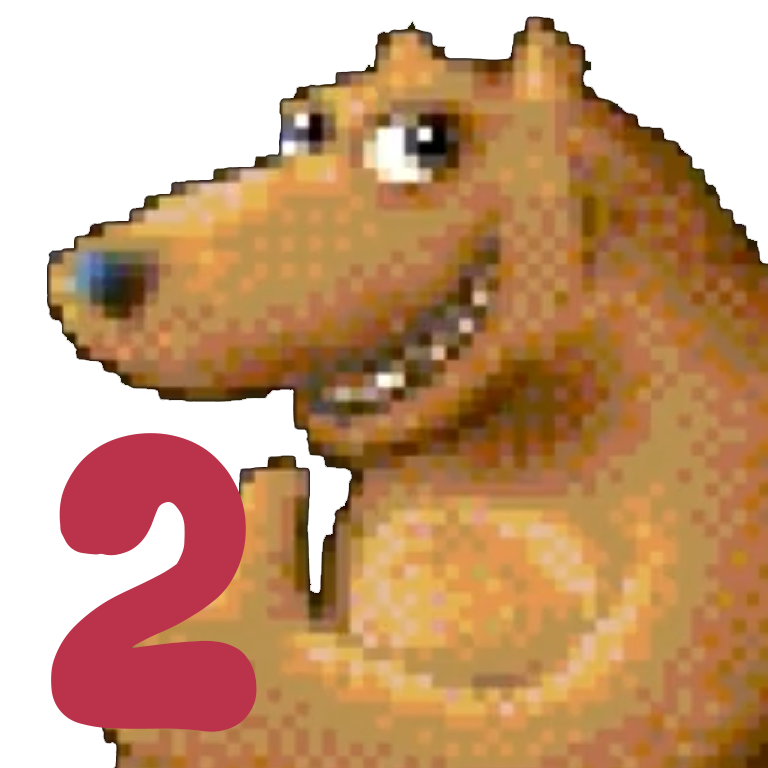
<style>
.page{position:relative;width:768px;height:768px;background:#ffffff}
.page>*{position:absolute;margin:0}
.t1{font:400px "Milk-Mango";color:#bb334a}
</style>
<div class="page">
<p class="t1" style="left:51px;top:433px;width:206px;height:299px">2</p>
</div>
